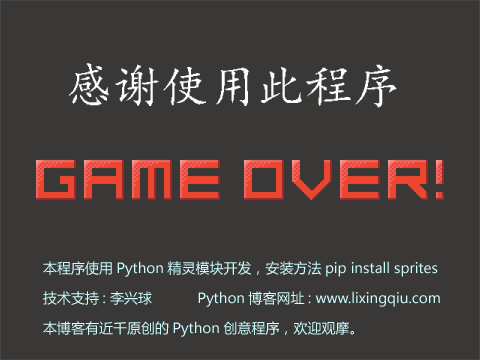
<style>
.page{position:relative;width:480px;height:360px;background:#393837}
.page>*{position:absolute;margin:0}
.t1{font:48px "¿¬Ìå-Regular";color:#ffffff}
.t2{font:14px/30px "MicrosoftYaHei";color:#ccffff}
</style>
<div class="page">
<p class="t1" style="left:68px;top:63px;width:329px;height:45px">感谢使用此程序</p>
<p class="t2" style="left:43px;top:261px;width:397px;height:76px">本程序使用Python精灵模块开发，安装方法pip install sprites<br>技术支持: 李兴球           Python博客网址: www.lixingqiu.com<br>本博客有近千原创的Python创意程序，欢迎观摩。</p>
</div>
